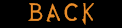
<style>
.page{position:relative;width:122px;height:28px;background:#000000}
.page>*{position:absolute;margin:0}
.t1{font:27.8px "RWBY_Style";letter-spacing:0.14em;color:#eb8d29;scale:1.08 1}
</style>
<div class="page">
<p class="t1" style="left:28px;top:3px;width:66px;height:22px">back</p>
</div>
